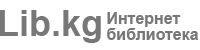
<style>
.page{position:relative;width:200px;height:50px;background:#ffffff}
.page>*{position:absolute;margin:0}
.t1{font:36px "Arial-BoldMT";color:#777777}
.t2{font:16px/16px "Arial-BoldMT";color:#777777}
</style>
<div class="page">
<p class="t1" style="left:0px;top:10px;width:101px;height:33px">Lib.kg</p>
<p class="t2" style="left:107px;top:12px;width:91px;height:28px">Интернет <br>библиотека</p>
</div>
